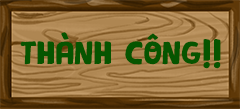
<style>
.page{position:relative;width:240px;height:109px}
.page>*{position:absolute;margin:0}
.t1{font:36px "iCielPequena";color:#065500}
</style>
<div class="page">
<p class="t1" style="left:20px;top:32px;width:201px;height:37px">THÀNH CÔNG!!</p>
</div>
